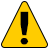
<style>
.page{position:relative;width:48px;height:48px;background:#ffffff}
.page>*{position:absolute;margin:0}
.t1{font:47.6px "HighwayGothicWide";color:#000000;scale:1.18 1}
</style>
<div class="page">
<p class="t1" style="left:20px;top:11px;width:9px;height:34px">!</p>
</div>
